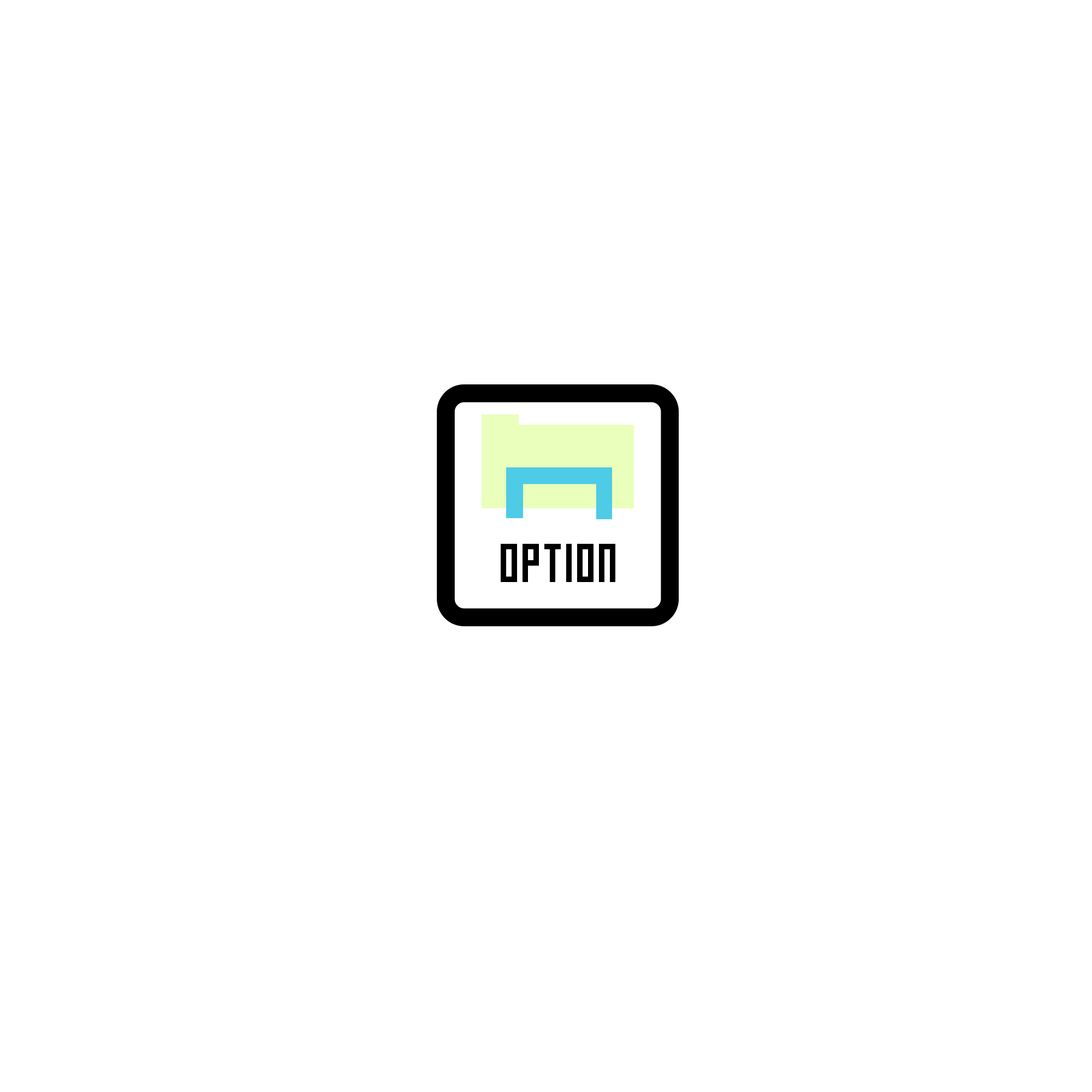
<style>
.page{position:relative;width:1092px;height:1092px;background:#ffffff}
.page>*{position:absolute;margin:0}
.t1{font:54.6px "pxl";color:#000000}
</style>
<div class="page">
<p class="t1" style="left:501px;top:544px;width:114px;height:38px">OPTION</p>
</div>
